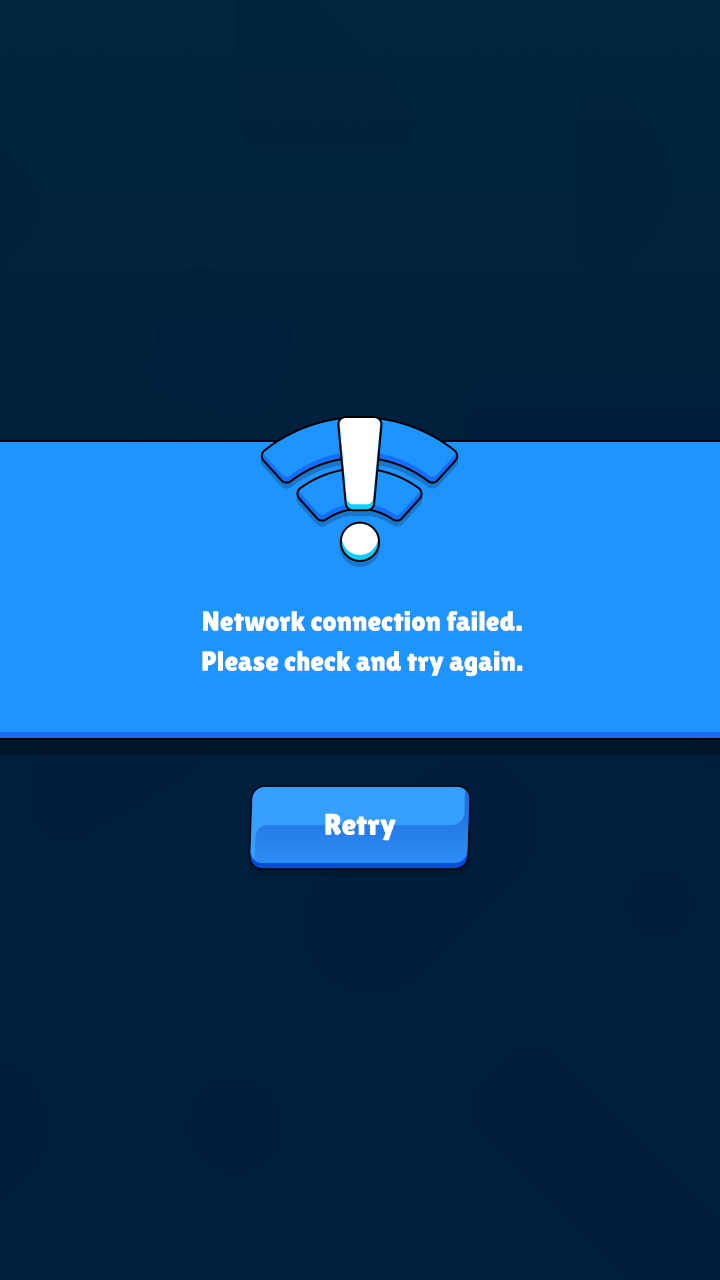
<style>
.page{position:relative;width:720px;height:1280px;background:#001f3c}
.page>*{position:absolute;margin:0}
.t1{font:28px/40px "LilitaOne";color:#ffffff}
.t2{font:30px "LilitaOne";color:#ffffff}
</style>
<div class="page">
<p class="t1" style="left:202px;top:611px;width:321px;height:66px;text-align:center">Network connection failed.<br>Please check and try again.</p>
<p class="t2" style="left:325px;top:813px;width:71px;height:28px">Retry</p>
</div>
